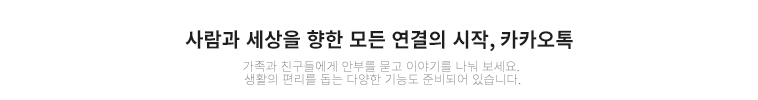
<style>
.page{position:relative;width:758px;height:100px;background:#ffffff}
.page>*{position:absolute;margin:0}
.t1{font:20px "NotoSansKR-Bold";color:#1e1e1e}
.t2{font:12.5px/13.9px "NotoSansKR-Light"}
</style>
<div class="page">
<p class="t1" style="left:185px;top:30px;width:388px;height:22px">사람과 세상을 향한 모든 연결의 시작, 카카오톡</p>
<p class="t2" style="left:243px;top:60px;width:278px;height:25px;text-align:center">가족과 친구들에게 안부를 묻고 이야기를 나눠 보세요. <br>생활의 편리를 돕는 다양한 기능도 준비되어 있습니다.</p>
</div>
